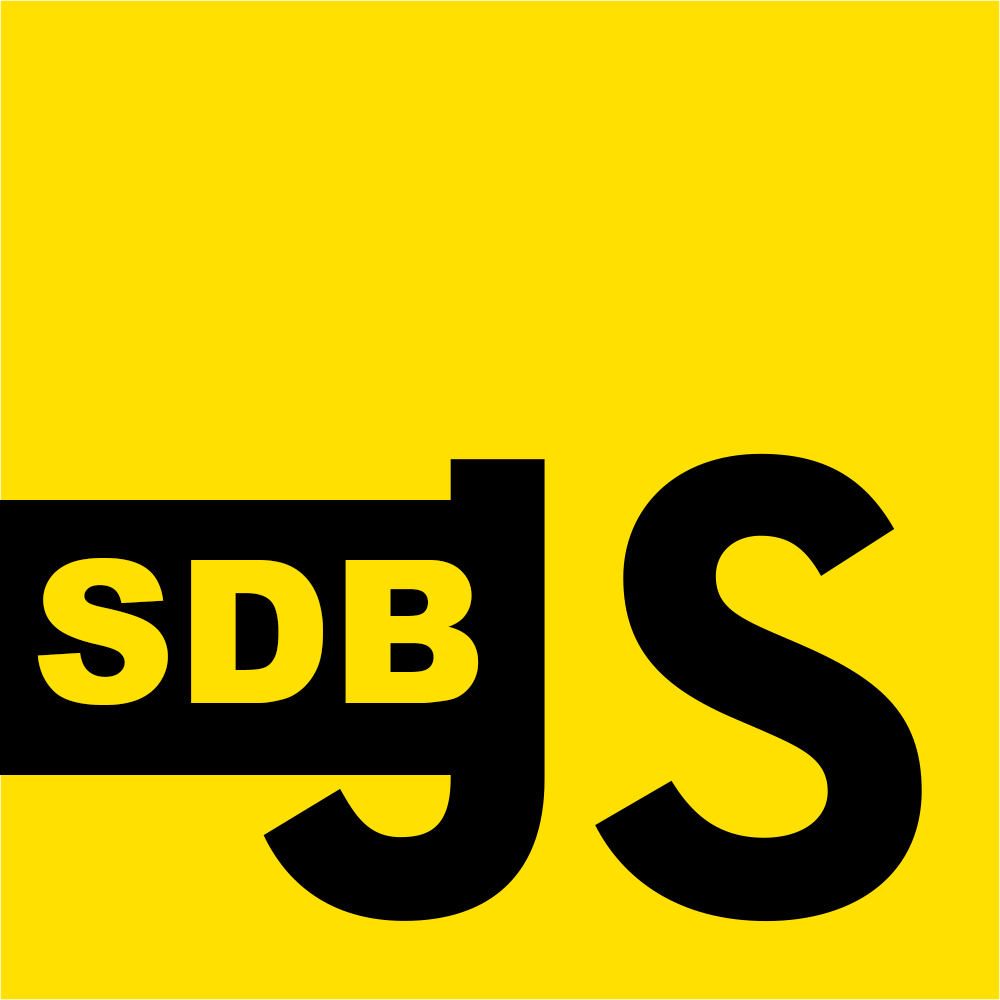
<style>
.page{position:relative;width:1000px;height:1000px;background:#ffe000}
.page>*{position:absolute;margin:0}
.t1{font:200px "Arial-Black";color:#ffe000;text-transform:uppercase}
</style>
<div class="page">
<p class="t1" style="left:37px;top:558px;width:442px;height:147px">SDB</p>
</div>
